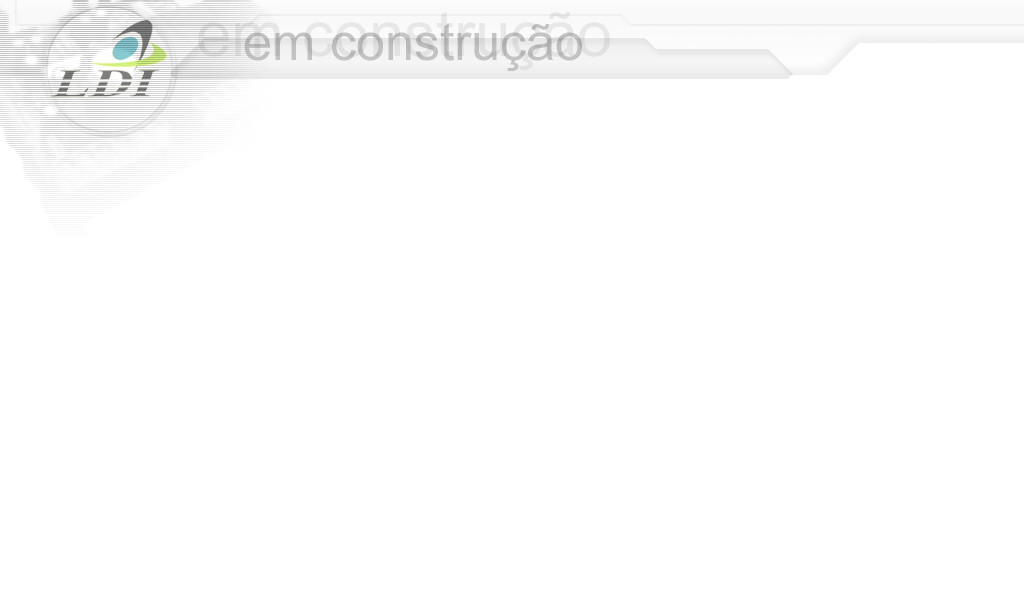
<style>
.page{position:relative;width:1024px;height:600px;background:#ffffff}
.page>*{position:absolute;margin:0}
.t1{font:63.5px "ArialMT";color:#e1e1e1}
.t2{font:52px "ArialMT";color:#bfbfbf}
</style>
<div class="page">
<p class="t1" style="left:198px;top:11px;width:412px;height:59px">em construção</p>
<p class="t2" style="left:244px;top:23px;width:338px;height:48px">em construção</p>
</div>
